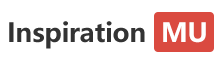
<style>
.page{position:relative;width:224px;height:64px;background:#ffffff}
.page>*{position:absolute;margin:0}
.t1{font:26px "MicrosoftYaHei-Bold";letter-spacing:-0.01em;color:#333333}
.t2{font:26px "MicrosoftYaHei-Bold";letter-spacing:-0.01em;color:#ffffff}
</style>
<div class="page">
<p class="t1" style="left:9px;top:21px;width:197px;height:28px">Inspiration  <span class="t2">MU</span></p>
</div>
